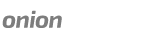
<style>
.page{position:relative;width:148px;height:42px;background:#ffffff}
.page>*{position:absolute;margin:0}
.t1{font:24px "Exo2Italic-BoldItalic";letter-spacing:-0.03em;color:#7d7d7d}
.t2{font:24px "Exo2Italic-BoldItalic";letter-spacing:-0.03em;color:#ffffff}
</style>
<div class="page">
<p class="t1" style="left:2px;top:10px;width:86px;height:18px">onion<span class="t2">os</span></p>
</div>
